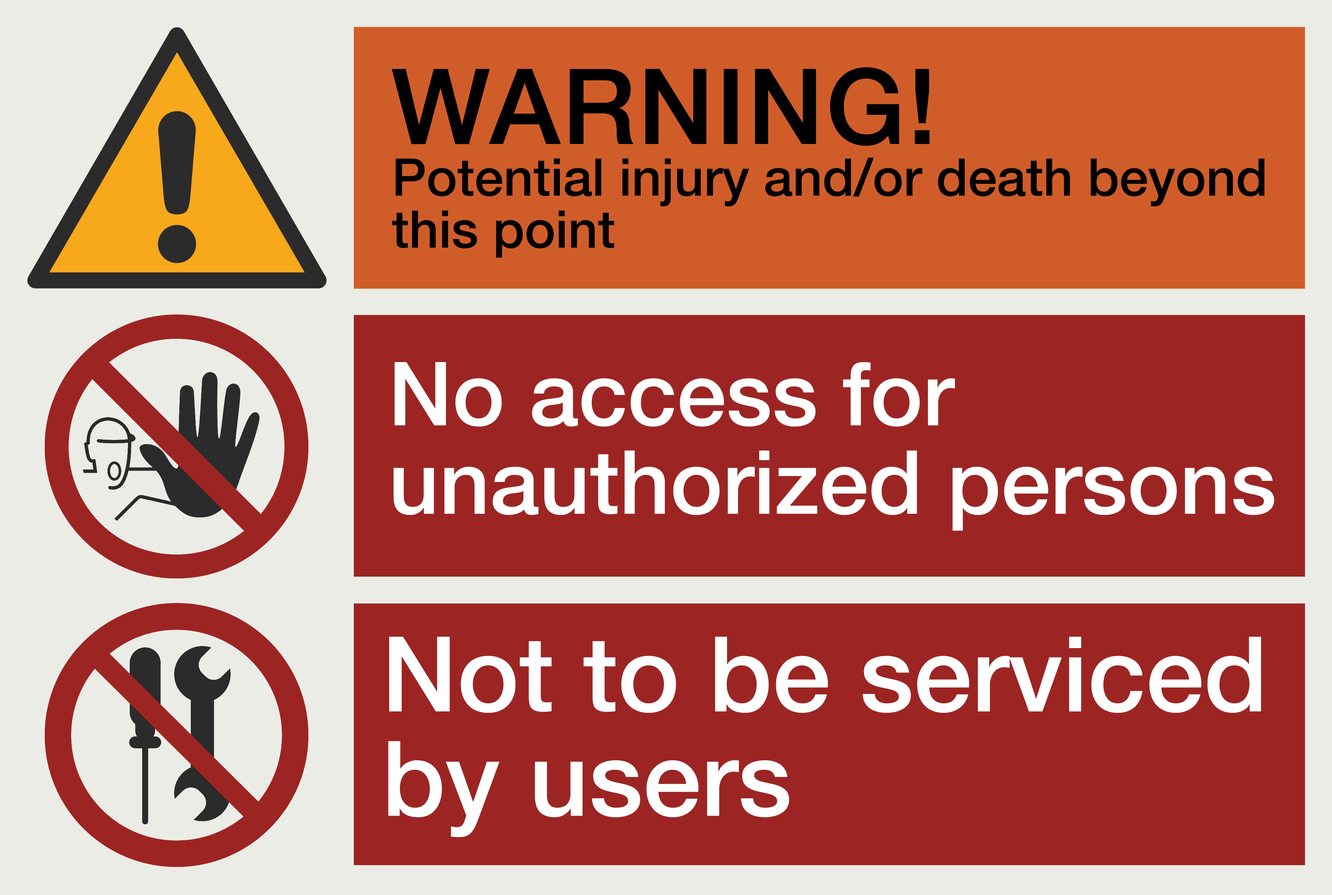
<style>
.page{position:relative;width:1332px;height:895px;background:#9c2523}
.page>*{position:absolute;margin:0}
.t1{font:52px/52px "HelveticaNeue-Medium";color:#000000}
.t2{font:104.1px/86.7px "HelveticaNeue-Medium";color:#000000;font-weight:bold}
.t3{font:88.4px/88.4px "HelveticaNeue-Medium";color:#ffffff}
.t4{font:104.4px/104.4px "HelveticaNeue-Medium";color:#ffffff}
</style>
<div class="page">
<p class="t1" style="left:392px;top:67px;width:873px;height:191px"><span class="t2">WARNING!<br></span>Potential injury and/or death beyond this point</p>
<p class="t3" style="left:393px;top:362px;width:881px;height:169px">No access for unauthorized persons</p>
<p class="t4" style="left:388px;top:637px;width:873px;height:200px">Not to be serviced<br>by users</p>
</div>
